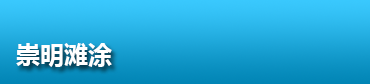
<style>
.page{position:relative;width:370px;height:84px}
.page>*{position:absolute;margin:0}
.t1{font:24px "MicrosoftYaHei-Bold";color:#ffffff}
</style>
<div class="page">
<p class="t1" style="left:16px;top:43px;width:96px;height:24px">崇明滩涂</p>
</div>
